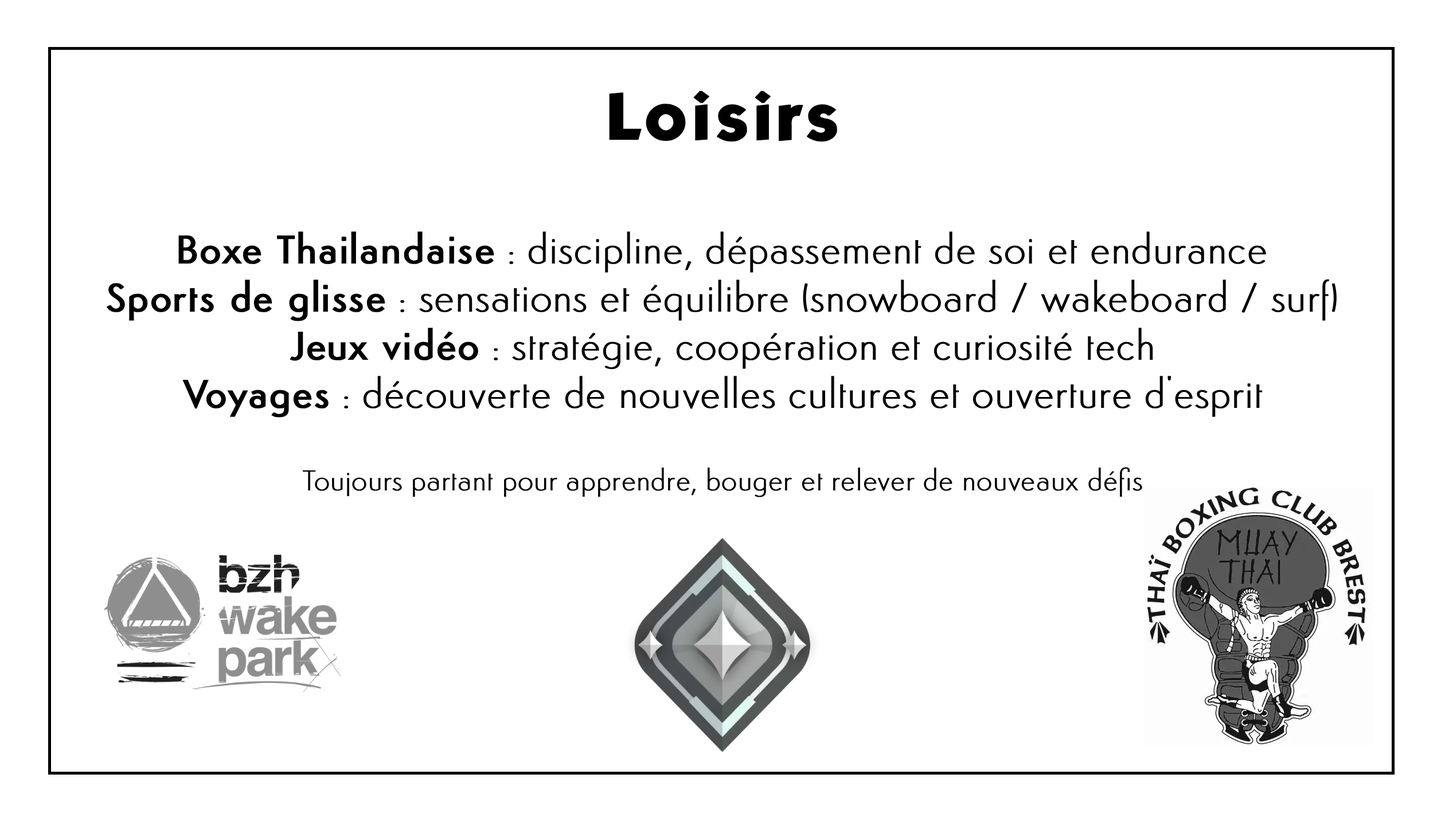
<style>
.page{position:relative;width:1445px;height:825px;background:#ffffff}
.page>*{position:absolute;margin:0}
.t1{font:57.3px "KabelBdNormal";color:#000000;font-weight:bold}
.t2{font:28.7px "Semplicita-Light";color:#000000;font-weight:bold}
.t3{font:40.1px "Semplicita-Medium";color:#000000;font-weight:bold}
.t4{font:40.1px "Semplicita-Light";color:#000000;font-weight:bold}
</style>
<div class="page">
<p class="t1" style="left:609px;top:91px;width:228px;height:51px">Loisirs</p>
<p class="t2" style="left:106px;top:232px;width:1230px;height:266px;text-align:center"><span class="t3">Boxe Thailandaise</span><span class="t4"> : discipline, dépassement de soi et endurance<br></span><span class="t3">Sports de glisse</span><span class="t4"> : sensations et équilibre (snowboard / wakeboard / surf)<br></span><span class="t3">Jeux vidéo</span><span class="t4"> : stratégie, coopération et curiosité tech<br></span><span class="t3">Voyages</span><span class="t4"> : découverte de nouvelles cultures et ouverture d'esprit<br><br></span>Toujours partant pour apprendre, bouger et relever de nouveaux défis</p>
</div>
